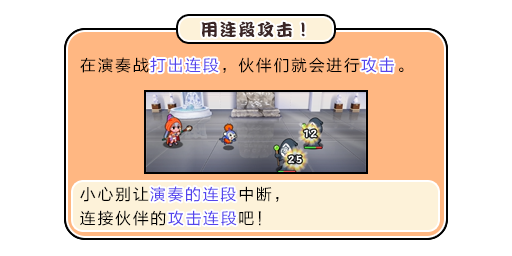
<style>
.page{position:relative;width:512px;height:256px;background:#ffffff}
.page>*{position:absolute;margin:0}
.t1{font:17px "DFPKanTingLiuW9";letter-spacing:0.1em;color:#3b2626}
.t2{font:16px "FZLTHJW--GB1-0";letter-spacing:0.1em;color:#000000}
.t3{font:16px "FZLTHJW--GB1-0";letter-spacing:0.1em;color:#5444ed}
.t4{font:16px/24px "FZLTHJW--GB1-0";letter-spacing:0.1em;color:#000000}
.t5{font:16px/24px "FZLTHJW--GB1-0";letter-spacing:0.1em;color:#5444ed}
</style>
<div class="page">
<p class="t1" style="left:201px;top:21px;width:104px;height:16px">用连段攻击！</p>
<p class="t2" style="left:80px;top:57px;width:324px;height:16px">在演奏战<span class="t3">打出连段</span>，伙伴们就会进行<span class="t3">攻击</span>。</p>
<p class="t3" style="left:150px;top:57px;width:69px;height:16px">打出连段</p>
<p class="t3" style="left:361px;top:57px;width:33px;height:16px">攻击</p>
<p class="t4" style="left:80px;top:186px;width:199px;height:40px">小心别让<span class="t5">演奏的连段</span>中断，<br>连接伙伴的<span class="t5">攻击连段</span>吧！</p>
<p class="t3" style="left:150px;top:186px;width:86px;height:16px">演奏的连段</p>
<p class="t3" style="left:168px;top:210px;width:69px;height:16px">攻击连段</p>
</div>
